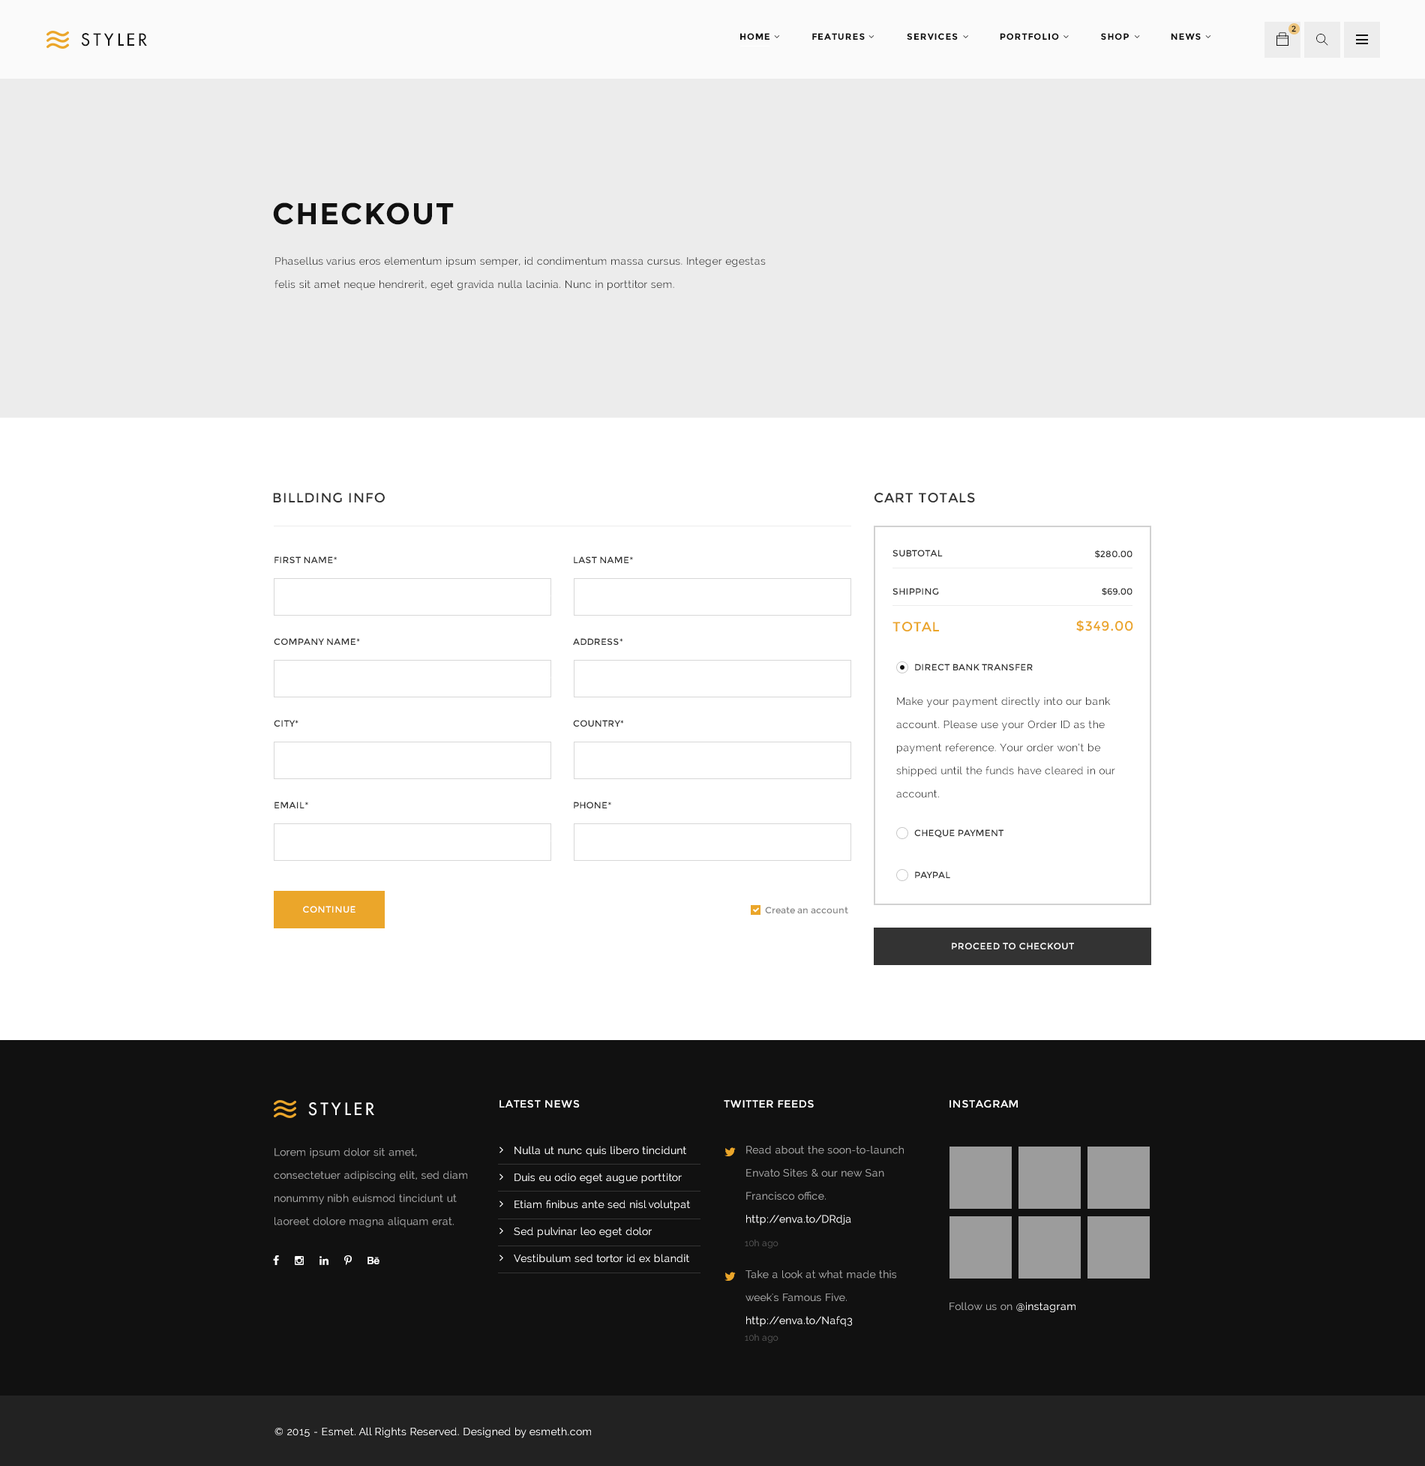
<style>
.page{position:relative;width:1425px;height:1466px;background:#ffffff}
.page>*{position:absolute;margin:0}
.t1{font:8.2px "Montserrat-Regular";letter-spacing:0.075em;color:#111111;text-transform:uppercase}
.t2{font:16.5px "FuturaLT";letter-spacing:0.2em;color:#111111;text-transform:uppercase}
.t3{font:9px "Montserrat-Bold";letter-spacing:0.075em;color:#111111;text-transform:uppercase}
.t4{font:30px "Montserrat-Bold";letter-spacing:0.05em;color:#111111;text-transform:uppercase}
.t5{font:10.5px/23.1px "Raleway";letter-spacing:0.02em;color:#333333}
.t6{font:13.5px "Montserrat-Regular";letter-spacing:0.05em;color:#333333;text-transform:uppercase}
.t7{font:13.5px "Montserrat-Regular";letter-spacing:0.05em;color:#333333}
.t8{font:9px "Montserrat-Regular";letter-spacing:0.02em;color:#333333;text-transform:uppercase}
.t9{font:9px "Montserrat-Regular";letter-spacing:0.02em;color:#333333}
.t10{font:13.5px "Montserrat-Regular";letter-spacing:0.05em;color:#eba62a}
.t11{font:9px "Montserrat-Regular";letter-spacing:0.05em;color:#ffffff}
.t12{font:9px "Montserrat-Regular";color:#888888}
.t13{font:16.5px "FuturaLT";letter-spacing:0.2em;color:#ffffff;text-transform:uppercase}
.t14{font:10.5px "Montserrat-Regular";letter-spacing:0.05em;color:#ffffff;text-transform:uppercase}
.t15{font:10.5px/23.1px "Raleway";letter-spacing:0.02em;color:#a9a9a9}
.t16{font:10.5px/27px "Raleway";letter-spacing:0.02em;color:#ffffff}
.t17{font:10.5px/23.1px "Raleway";letter-spacing:0.02em;color:#ffffff}
.t18{font:9px "Raleway";letter-spacing:0.02em;color:#545454}
.t19{font:10.5px "Raleway";letter-spacing:0.02em;color:#a9a9a9}
.t20{font:10.5px "Raleway";letter-spacing:0.02em;color:#ffffff}
</style>
<div class="page">
<p class="t1" style="left:1292px;top:26px;width:4px;height:6px">2</p>
<p class="t2" style="left:81px;top:33px;width:66px;height:13px">styler</p>
<p class="t3" style="left:740px;top:33px;width:461px;height:7px">HOME              FEATURES              SERVICES              portfolio              SHOP              NEWS</p>
<p class="t4" style="left:273px;top:202px;width:181px;height:23px">checkout</p>
<p class="t5" style="left:274px;top:256px;width:492px;height:34px">Phasellus varius eros elementum ipsum semper, id condimentum massa cursus. Integer egestas felis sit amet neque hendrerit, eget gravida nulla lacinia. Nunc in porttitor sem.</p>
<p class="t6" style="left:273px;top:493px;width:112px;height:10px">Billding info</p>
<p class="t7" style="left:874px;top:493px;width:101px;height:10px">CART TOTALS</p>
<p class="t8" style="left:274px;top:556px;width:63px;height:7px">first name*</p>
<p class="t8" style="left:574px;top:556px;width:59px;height:7px">last name*</p>
<p class="t9" style="left:892px;top:550px;width:51px;height:6px">SUBTOTAL</p>
<p class="t9" style="left:1095px;top:550px;width:37px;height:8px">$280.00</p>
<p class="t9" style="left:892px;top:588px;width:47px;height:7px">SHIPPING</p>
<p class="t9" style="left:1102px;top:588px;width:30px;height:8px">$69.00</p>
<p class="t10" style="left:892px;top:622px;width:47px;height:10px">TOTAL</p>
<p class="t10" style="left:1076px;top:620px;width:57px;height:12px">$349.00</p>
<p class="t8" style="left:274px;top:638px;width:86px;height:7px">company name*</p>
<p class="t8" style="left:573px;top:638px;width:50px;height:7px">address*</p>
<p class="t8" style="left:915px;top:664px;width:118px;height:6px">dIRECT BANK TRANSFER</p>
<p class="t5" style="left:896px;top:697px;width:219px;height:101px">Make your payment directly into our bank account. Please use your Order ID as the payment reference. Your order won’t be shipped until the funds have cleared in our account.</p>
<p class="t8" style="left:274px;top:720px;width:24px;height:7px">city*</p>
<p class="t8" style="left:573px;top:720px;width:51px;height:7px">country*</p>
<p class="t8" style="left:274px;top:802px;width:34px;height:6px">Email*</p>
<p class="t8" style="left:574px;top:802px;width:37px;height:6px">Phone*</p>
<p class="t8" style="left:914px;top:830px;width:90px;height:8px">CHEQUE PAYMENT</p>
<p class="t8" style="left:915px;top:872px;width:35px;height:6px">PAYPAL</p>
<p class="t11" style="left:303px;top:906px;width:53px;height:7px">CONTINUE</p>
<p class="t12" style="left:765px;top:907px;width:83px;height:7px">Create an account</p>
<p class="t11" style="left:952px;top:943px;width:122px;height:7px">PROCEED TO CHECKOUT</p>
<p class="t13" style="left:308px;top:1102px;width:66px;height:14px">styler</p>
<p class="t14" style="left:500px;top:1100px;width:80px;height:8px">latest news</p>
<p class="t14" style="left:724px;top:1100px;width:90px;height:8px">twitter feeds</p>
<p class="t14" style="left:950px;top:1100px;width:68px;height:8px">instagram</p>
<p class="t15" style="left:274px;top:1148px;width:193px;height:80px">Lorem ipsum dolor sit amet, consectetuer adipiscing elit, sed diam nonummy nibh euismod tincidunt ut laoreet dolore magna aliquam erat.</p>
<p class="t16" style="left:514px;top:1146px;width:176px;height:117px">Nulla ut nunc quis libero tincidunt<br>Duis eu odio eget augue porttitor<br>Etiam finibus ante sed nisl volutpat<br>Sed pulvinar leo eget dolor<br>Vestibulum sed tortor id ex blandit</p>
<p class="t15" style="left:746px;top:1146px;width:158px;height:80px">Read about the soon-to-launch Envato Sites &amp; our new San Francisco office. <span class="t17">http://enva.to/DRdja</span></p>
<p class="t18" style="left:745px;top:1240px;width:33px;height:9px">10h ago</p>
<p class="t15" style="left:746px;top:1270px;width:150px;height:57px">Take a look at what made this week's Famous Five. <span class="t17">http://enva.to/Nafq3</span></p>
<p class="t19" style="left:950px;top:1302px;width:126px;height:10px">Follow us on <span class="t20">@instagram</span></p>
<p class="t18" style="left:745px;top:1334px;width:33px;height:9px">10h ago</p>
<p class="t20" style="left:274px;top:1427px;width:317px;height:11px">© 2015 - Esmet. All Rights Reserved. Designed by esmeth.com</p>
</div>
